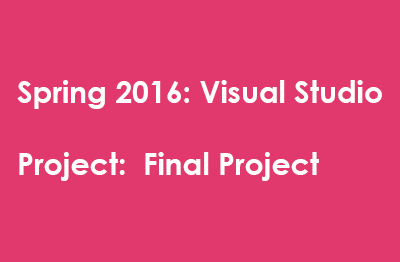
<style>
.page{position:relative;width:400px;height:262px;background:#e1396d}
.page>*{position:absolute;margin:0}
.t1{font:30px "CenturyGothic-Bold";color:#ffffff}
</style>
<div class="page">
<p class="t1" style="left:17px;top:80px;width:365px;height:101px">Spring 2016: Visual Studio<br><br>Project:  Final Project</p>
</div>
